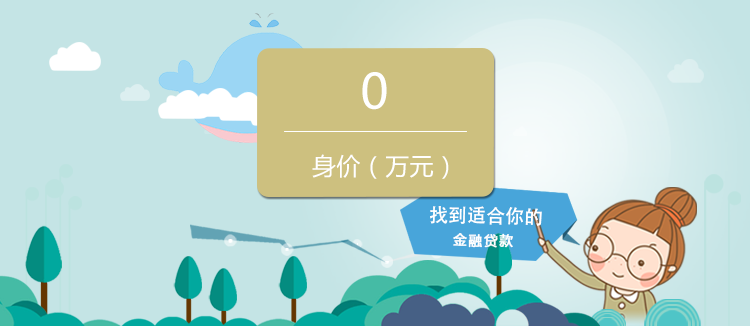
<style>
.page{position:relative;width:750px;height:326px;background:#c4e4e5}
.page>*{position:absolute;margin:0}
.t1{font:48px "MicrosoftYaHei";letter-spacing:0.06em;color:#ffffff}
.t2{font:24px "MicrosoftYaHei";letter-spacing:0.02em;color:#ffffff}
.t3{font:19.1px "AdobeHeitiStd-Regular";color:#ffffff}
.t4{font:13.3px "MicrosoftYaHei";letter-spacing:0.14em;color:#ffffff;font-weight:bold}
</style>
<div class="page">
<p class="t1" style="left:362px;top:72px;width:25px;height:38px">0</p>
<p class="t2" style="left:312px;top:154px;width:137px;height:25px">身价（万元）</p>
<p class="t3" style="left:430px;top:206px;width:112px;height:20px;rotate:1deg">找到适合你的</p>
<p class="t4" style="left:453px;top:233px;width:60px;height:15px;rotate:1deg">金融贷款</p>
</div>
